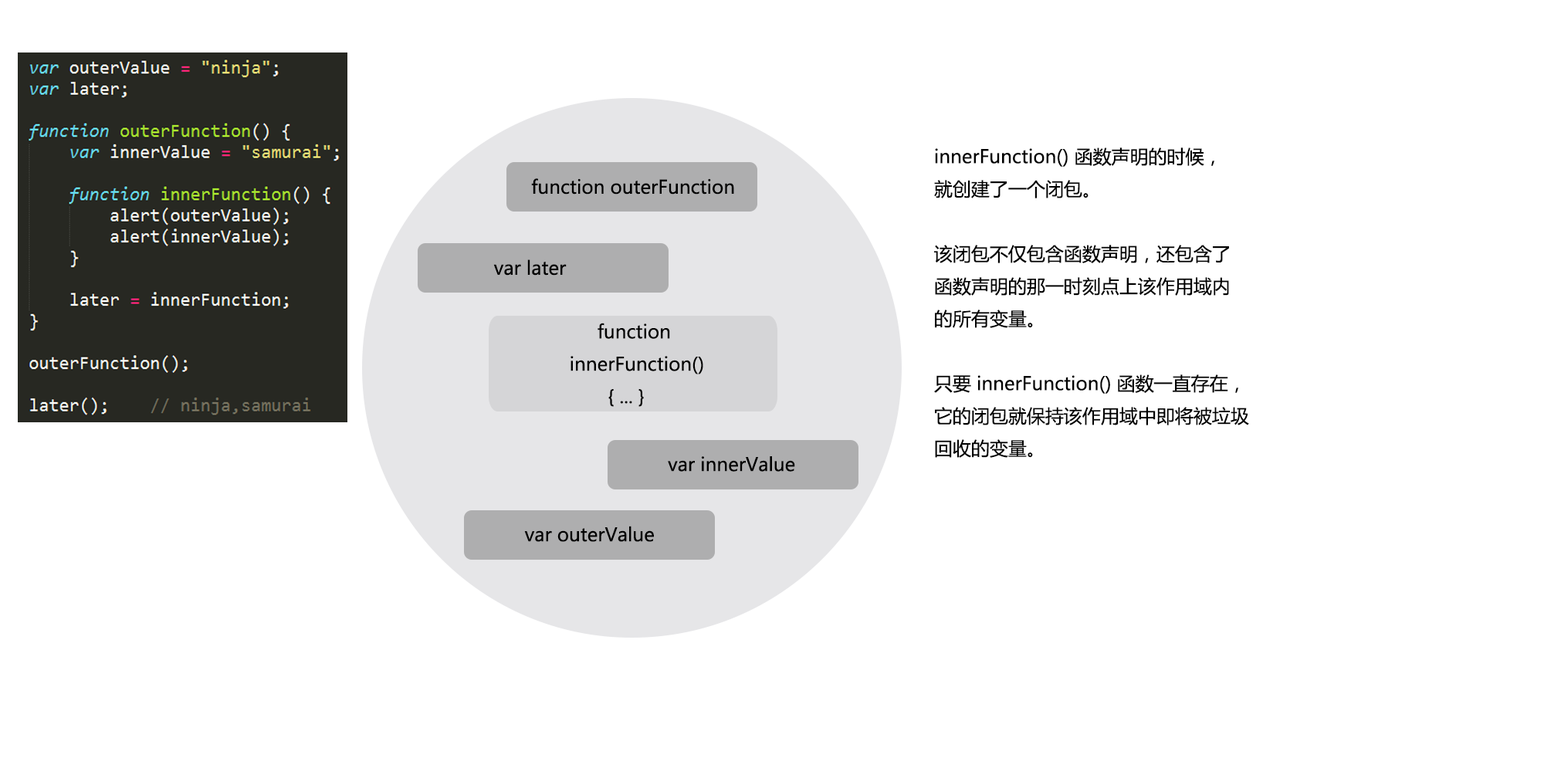
<style>
.page{position:relative;width:1544px;height:772px;background:#ffffff}
.page>*{position:absolute;margin:0}
.t1{font:18.5px "MicrosoftYaHei";color:#000000}
.t2{font:18.5px "SimSun";color:#000000}
</style>
<div class="page">
<p class="t1" style="left:934px;top:147px;width:315px;height:311px">innerFunction() 函数声明的时候，<br>就创建了一个闭包。<br><br>该闭包不仅包含函数声明，还包含了<br>函数声明的那一时刻点上该作用域内<br>的所有变量。<br><br>只要 innerFunction() 函数一直存在，<br>它的闭包就保持该作用域中即将被垃圾<br>回收的变量。</p>
<p class="t1" style="left:531px;top:178px;width:203px;height:17px">function outerFunction</p>
<p class="t1" style="left:493px;top:259px;width:74px;height:17px">var later</p>
<p class="t1" style="left:571px;top:323px;width:132px;height:84px"><span class="t2">   </span>function<br>innerFunction() <br>       { ... }</p>
<p class="t1" style="left:668px;top:456px;width:127px;height:16px">var innerValue</p>
<p class="t1" style="left:524px;top:526px;width:130px;height:16px">var outerValue</p>
</div>
